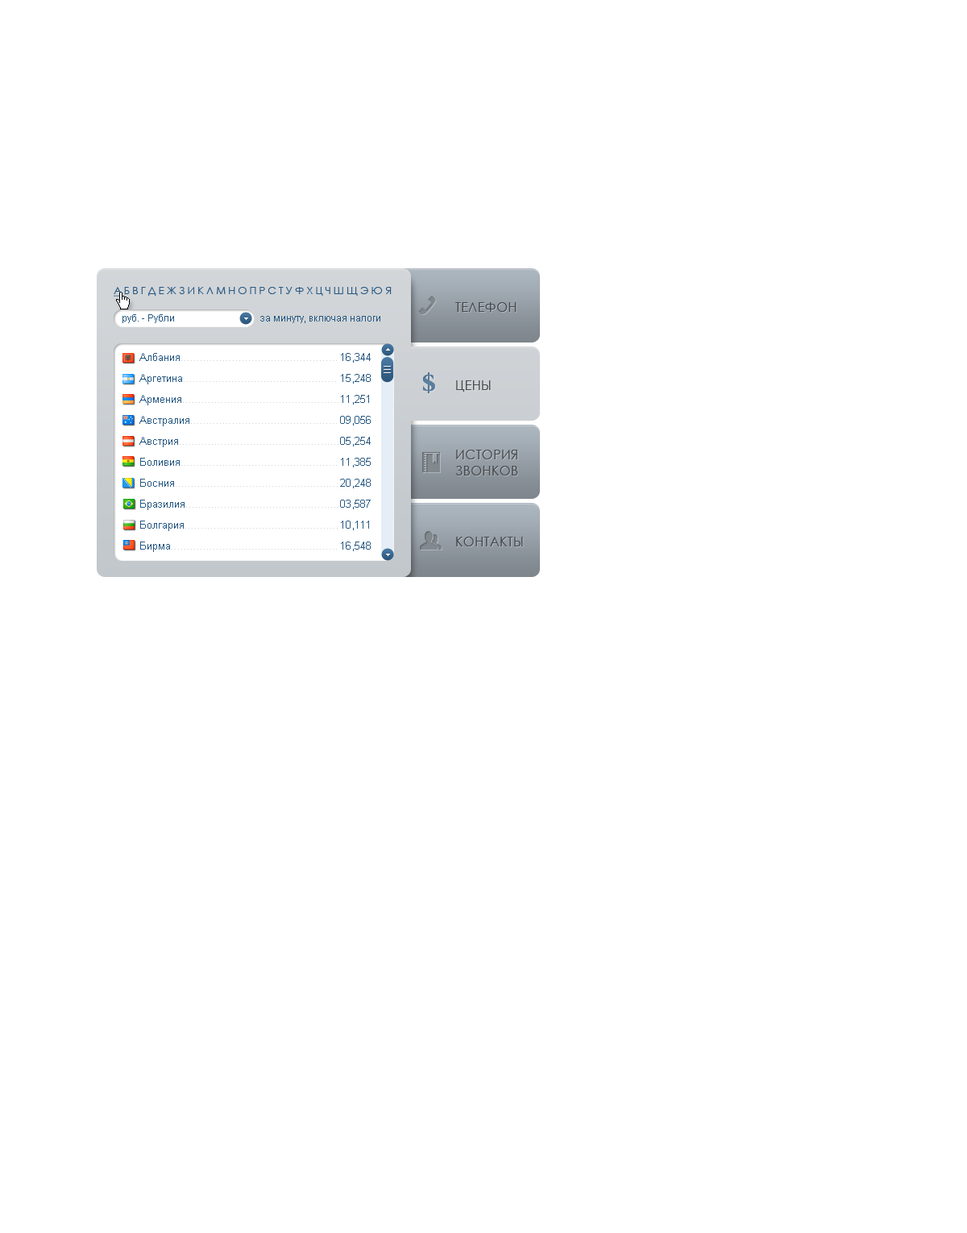
<style>
.page{position:relative;width:967px;height:1233px;background:#ffffff}
.page>*{position:absolute;margin:0}
.t1{font:10.5px "CenturyGothic";letter-spacing:-0.02em;color:#275882;text-transform:uppercase}
.t2{font:10.5px "CenturyGothic";letter-spacing:-0.02em;color:#275882;text-transform:uppercase;text-decoration:underline}
.t3{font:12.9px/78.2px "CenturyGothic";letter-spacing:0.025em;color:#45494d;text-transform:uppercase}
.t4{font:12.9px/69.3px "CenturyGothic";letter-spacing:0.025em;color:#45494d;text-transform:uppercase}
.t5{font:12.9px/16.1px "CenturyGothic";letter-spacing:0.025em;color:#45494d;text-transform:uppercase}
.t6{font:12.9px/70.9px "CenturyGothic";letter-spacing:0.025em;color:#45494d;text-transform:uppercase}
.t7{font:9.7px "ArialMT";color:#275882}
.t8{font:10.5px/21px "ArialMT";color:#cfd3d6}
.t9{font:10.5px/21px "ArialMT";color:#275882}
.t10{font:10.5px/21px "ArialMT";color:#ced2d5}
</style>
<div class="page">
<p class="t1" style="left:114px;top:287px;width:278px;height:10px"><span class="t2">А</span> Б в г Д Е Ж З И К Л М Н О П Р С Т У Ф Х Ц Ч Ш Щ Э Ю Я</p>
<p class="t3" style="left:455px;top:302px;width:68px;height:244px">телефон<br>цены<br><span class="t4">история<br></span><span class="t5">звонков<br></span><span class="t6">контакты</span></p>
<p class="t7" style="left:122px;top:314px;width:52px;height:9px">руб. - Рубли</p>
<p class="t7" style="left:260px;top:316px;width:120px;height:7px">за минуту, включая налоги</p>
<p class="t8" style="left:139px;top:353px;width:199px;height:199px"><span class="t9">Албания</span><span class="t10">.................................................<br></span><span class="t9">Аргетина</span>................................................<br><span class="t9">Армения</span>.................................................<br><span class="t9">Австралия</span>..............................................<br><span class="t9">Австрия</span>..................................................<br><span class="t9">Боливия</span>.................................................<br><span class="t9">Босния</span>...................................................<br><span class="t9">Бразилия</span>................................................<br><span class="t9">Болгария</span>................................................<br><span class="t9">Бирма</span>....................................................</p>
<p class="t9" style="left:340px;top:353px;width:31px;height:198px">16,344<br>15,248<br>11,251<br>09,056<br>05,254<br>11,385<br>20,248<br>03,587<br>10,111<br>16,548</p>
</div>
